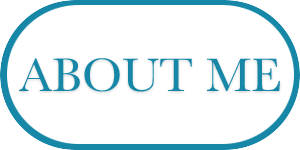
<style>
.page{position:relative;width:300px;height:150px;background:#ffffff}
.page>*{position:absolute;margin:0}
.t1{font:48.7px "Baskerville";color:#1687a7}
</style>
<div class="page">
<p class="t1" style="left:19px;top:58px;width:261px;height:34px">ABOUT ME</p>
</div>
